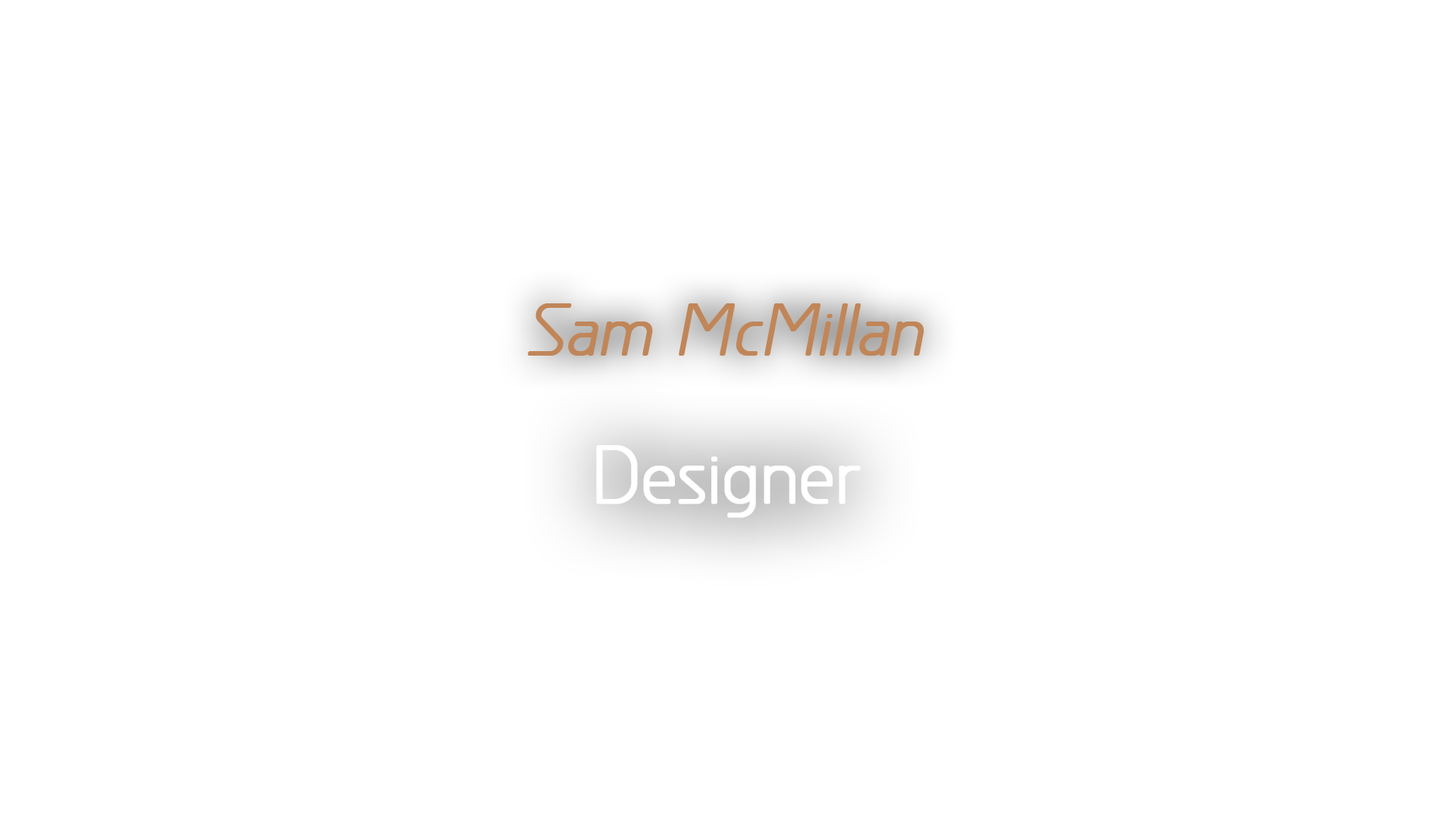
<style>
.page{position:relative;width:1456px;height:819px;background:#ffffff}
.page>*{position:absolute;margin:0}
.t1{font:68.2px "GreyscaleBasic";color:#c08659;font-weight:bold;font-style:italic}
.t2{font:75.8px "GreyscaleBasic";color:#ffffff;font-weight:bold}
</style>
<div class="page">
<p class="t1" style="left:528px;top:303px;width:396px;height:53px">Sam McMillan</p>
<p class="t2" style="left:596px;top:445px;width:265px;height:73px">Designer</p>
</div>
